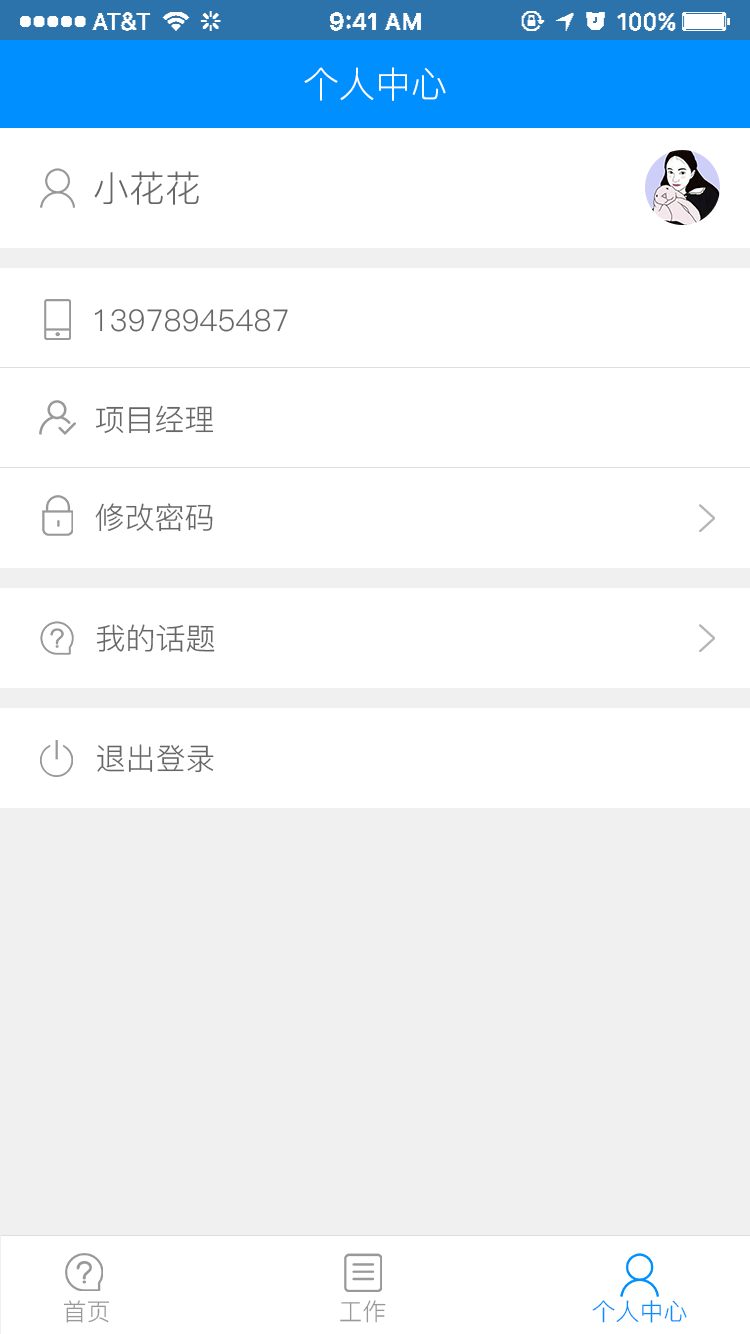
<style>
.page{position:relative;width:750px;height:1334px;background:#ffffff}
.page>*{position:absolute;margin:0}
.t1{font:36px "PingFang-SC-Regular";color:#ffffff}
.t2{font:36px "PingFang-SC-Regular";color:#666666}
.t3{font:30px "PingFang-SC-Regular";color:#666666}
.t4{font:24px "PingFang-SC-Regular";color:#999999}
.t5{font:24px "PingFang-SC-Regular";color:#008fff}
</style>
<div class="page">
<p class="t1" style="left:304px;top:67px;width:142px;height:34px">个人中心</p>
<p class="t2" style="left:94px;top:171px;width:105px;height:34px">小花花</p>
<p class="t3" style="left:94px;top:309px;width:194px;height:23px">13978945487</p>
<p class="t3" style="left:96px;top:405px;width:118px;height:29px">项目经理</p>
<p class="t3" style="left:95px;top:503px;width:118px;height:29px">修改密码</p>
<p class="t3" style="left:96px;top:624px;width:119px;height:28px">我的话题</p>
<p class="t3" style="left:97px;top:744px;width:117px;height:29px">退出登录</p>
<p class="t4" style="left:63px;top:1300px;width:46px;height:23px">首页</p>
<p class="t4" style="left:340px;top:1300px;width:46px;height:23px">工作</p>
<p class="t5" style="left:592px;top:1300px;width:95px;height:23px">个人中心</p>
</div>
